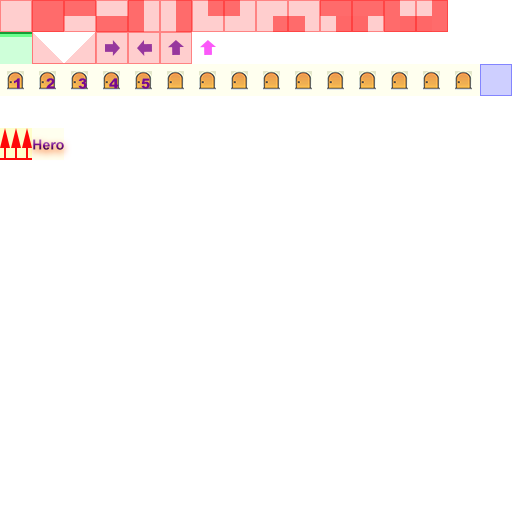
<style>
.page{position:relative;width:512px;height:512px;background:#ffffff}
.page>*{position:absolute;margin:0}
.t1{font:14px "Arial-Black";color:#780a8f}
.t2{font:14px "Arial-BoldMT"}
</style>
<div class="page">
<p class="t1" style="left:14px;top:78px;width:6px;height:11px">1</p>
<p class="t1" style="left:46px;top:78px;width:9px;height:11px">2</p>
<p class="t1" style="left:78px;top:78px;width:9px;height:11px">3</p>
<p class="t1" style="left:109px;top:78px;width:10px;height:11px">4</p>
<p class="t1" style="left:141px;top:78px;width:9px;height:11px">5</p>
<p class="t2" style="left:33px;top:139px;width:31px;height:11px">Hero</p>
</div>
